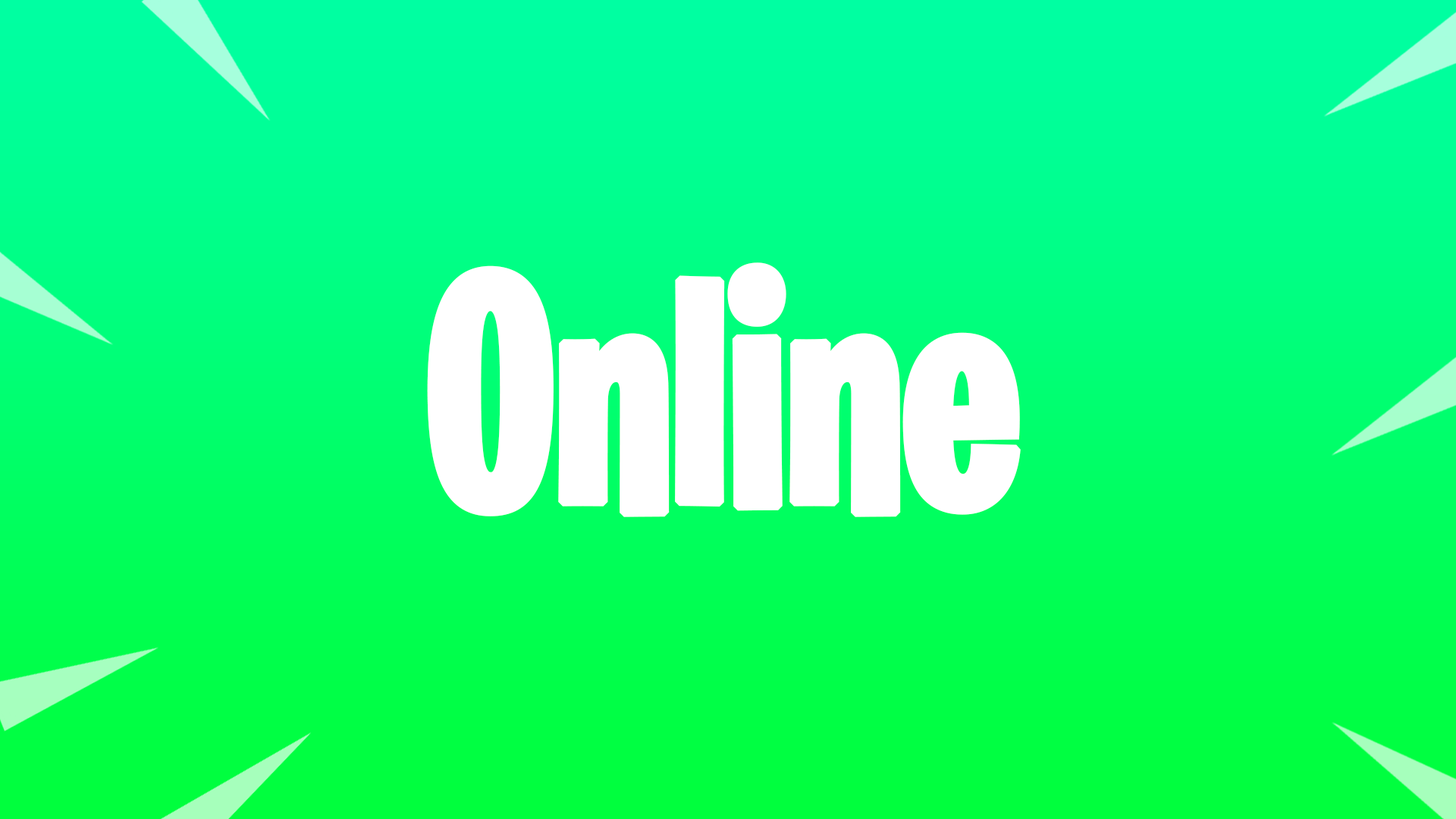
<style>
.page{position:relative;width:1456px;height:819px}
.page>*{position:absolute;margin:0}
.t1{font:333.7px "BurbankBigCondensed-Bold";letter-spacing:-0.025em;color:#ffffff;font-weight:bold;scale:0.91 1}
</style>
<div class="page">
<p class="t1" style="left:427px;top:262px;width:594px;height:255px">Online</p>
</div>
